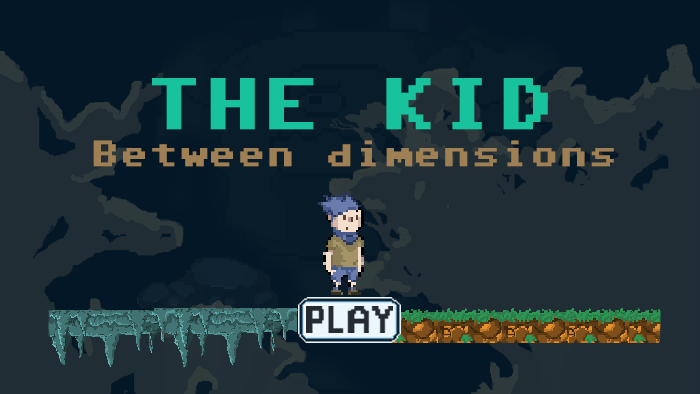
<style>
.page{position:relative;width:700px;height:394px;background:#202d35}
.page>*{position:absolute;margin:0}
.t1{font:75px "Commodore-64-Pixelized";color:#18c29c}
.t2{font:37.5px "Commodore-64-Pixelized";color:#9f8054}
</style>
<div class="page">
<p class="t1" style="left:152px;top:78px;width:396px;height:52px">THE KID</p>
<p class="t2" style="left:93px;top:140px;width:521px;height:27px">Between dimensions</p>
</div>
